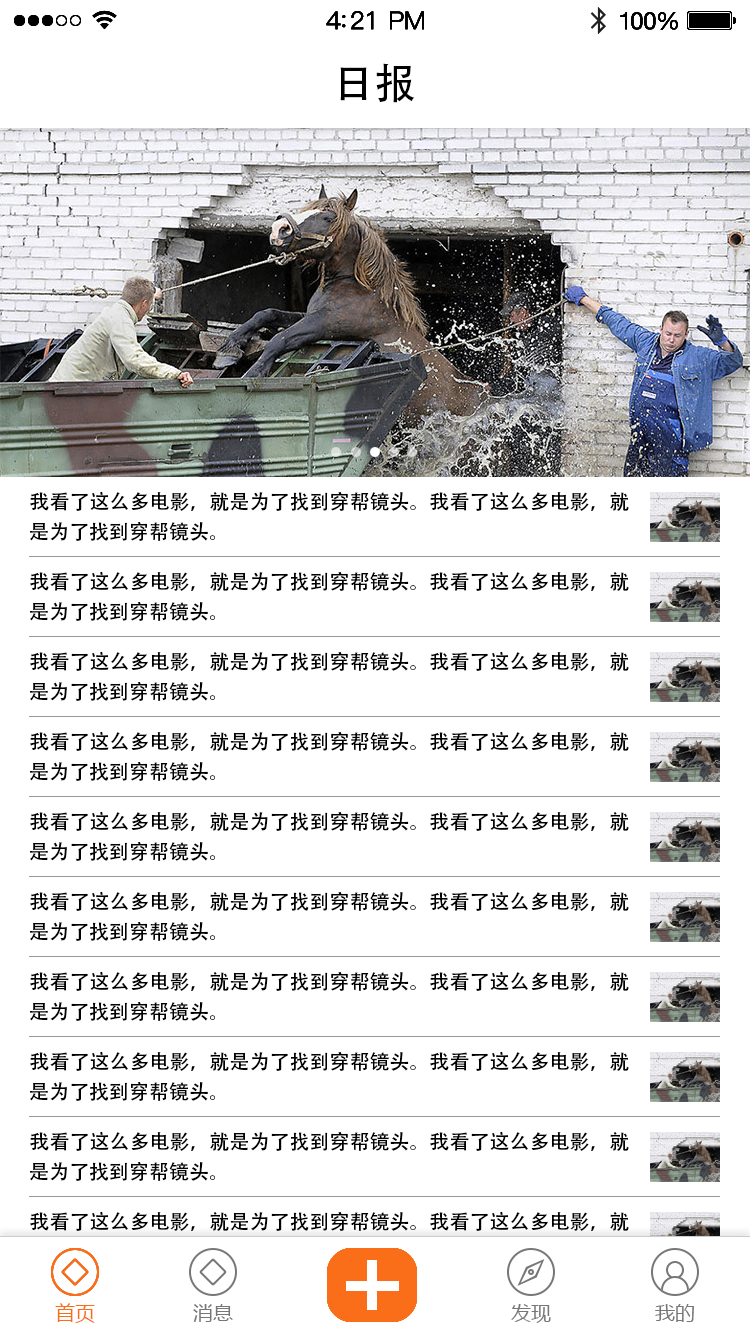
<style>
.page{position:relative;width:750px;height:1334px;background:#ffffff}
.page>*{position:absolute;margin:0}
.t1{font:42px "AdobeHeitiStd-Regular";color:#000000}
.t2{font:20px "AdobeHeitiStd-Regular";color:#000000}
.t3{font:20px "MicrosoftYaHei";color:#fb6e19}
.t4{font:20px "MicrosoftYaHei";color:#777777}
</style>
<div class="page">
<p class="t1" style="left:340px;top:63px;width:75px;height:40px">日报</p>
<p class="t2" style="left:30px;top:492px;width:599px;height:19px">我看了这么多电影，就是为了找到穿帮镜头。我看了这么多电影，就</p>
<p class="t2" style="left:30px;top:522px;width:185px;height:19px">是为了找到穿帮镜头。</p>
<p class="t2" style="left:30px;top:572px;width:599px;height:19px">我看了这么多电影，就是为了找到穿帮镜头。我看了这么多电影，就</p>
<p class="t2" style="left:30px;top:602px;width:185px;height:19px">是为了找到穿帮镜头。</p>
<p class="t2" style="left:30px;top:652px;width:599px;height:19px">我看了这么多电影，就是为了找到穿帮镜头。我看了这么多电影，就</p>
<p class="t2" style="left:30px;top:682px;width:185px;height:19px">是为了找到穿帮镜头。</p>
<p class="t2" style="left:30px;top:732px;width:599px;height:19px">我看了这么多电影，就是为了找到穿帮镜头。我看了这么多电影，就</p>
<p class="t2" style="left:30px;top:762px;width:185px;height:19px">是为了找到穿帮镜头。</p>
<p class="t2" style="left:30px;top:812px;width:599px;height:19px">我看了这么多电影，就是为了找到穿帮镜头。我看了这么多电影，就</p>
<p class="t2" style="left:30px;top:842px;width:185px;height:19px">是为了找到穿帮镜头。</p>
<p class="t2" style="left:30px;top:892px;width:599px;height:19px">我看了这么多电影，就是为了找到穿帮镜头。我看了这么多电影，就</p>
<p class="t2" style="left:30px;top:922px;width:185px;height:19px">是为了找到穿帮镜头。</p>
<p class="t2" style="left:30px;top:972px;width:599px;height:19px">我看了这么多电影，就是为了找到穿帮镜头。我看了这么多电影，就</p>
<p class="t2" style="left:30px;top:1002px;width:185px;height:19px">是为了找到穿帮镜头。</p>
<p class="t2" style="left:30px;top:1052px;width:599px;height:19px">我看了这么多电影，就是为了找到穿帮镜头。我看了这么多电影，就</p>
<p class="t2" style="left:30px;top:1082px;width:185px;height:19px">是为了找到穿帮镜头。</p>
<p class="t2" style="left:30px;top:1132px;width:599px;height:19px">我看了这么多电影，就是为了找到穿帮镜头。我看了这么多电影，就</p>
<p class="t2" style="left:30px;top:1162px;width:185px;height:19px">是为了找到穿帮镜头。</p>
<p class="t2" style="left:30px;top:1212px;width:599px;height:19px">我看了这么多电影，就是为了找到穿帮镜头。我看了这么多电影，就</p>
<p class="t3" style="left:55px;top:1303px;width:40px;height:20px">首页</p>
<p class="t4" style="left:193px;top:1304px;width:40px;height:18px">消息</p>
<p class="t4" style="left:511px;top:1304px;width:40px;height:19px">发现</p>
<p class="t4" style="left:655px;top:1304px;width:39px;height:18px">我的</p>
</div>
